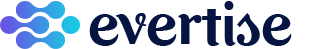
<style>
.page{position:relative;width:325px;height:49px;background:#ffffff}
.page>*{position:absolute;margin:0}
.t1{font:80px "DreamwoodDEMO-Regular";color:#051441;scale:0.89 1}
</style>
<div class="page">
<p class="t1" style="left:89px;top:1px;width:203px;height:45px">evertise</p>
</div>
